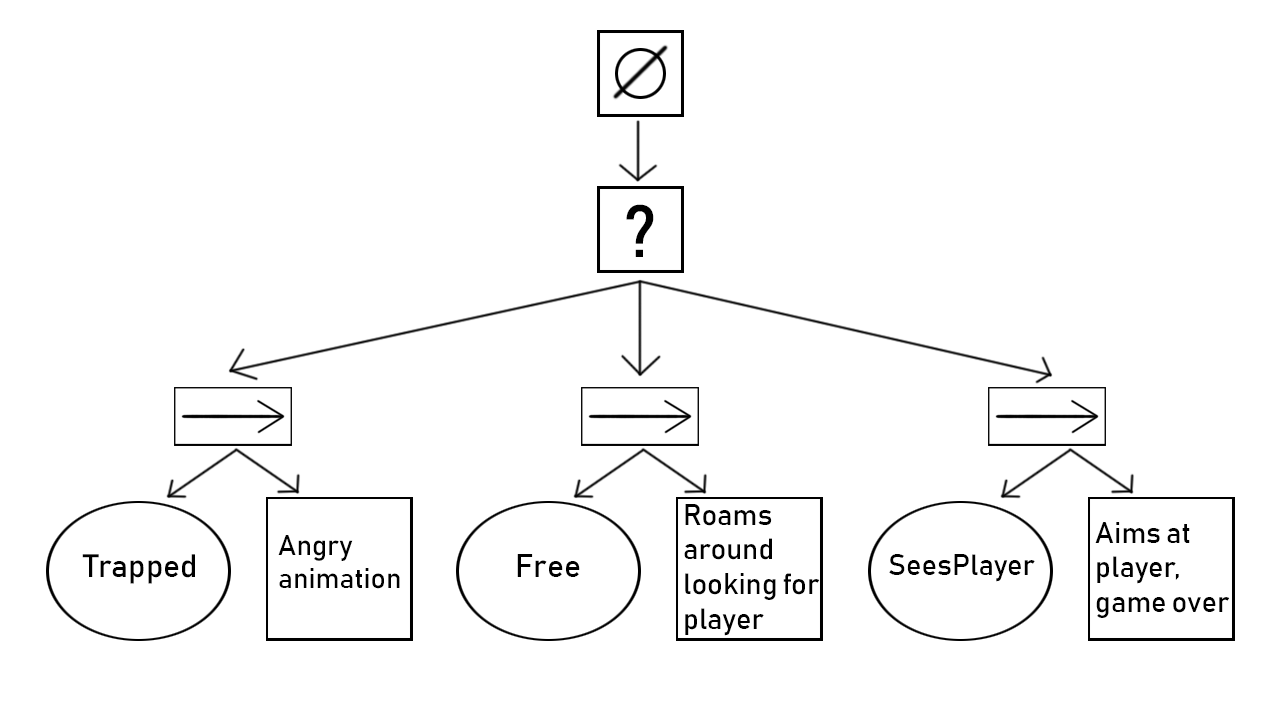
<style>
.page{position:relative;width:1280px;height:720px;background:#ffffff}
.page>*{position:absolute;margin:0}
.t1{font:29px "Bahnschrift";color:#000000}
.t2{font:28px "Bahnschrift";color:#000000}
.t3{font:32px "Bahnschrift";color:#000000}
</style>
<div class="page">
<p class="t1" style="left:684px;top:504px;width:136px;height:132px">Roams around looking for player</p>
<p class="t1" style="left:1095px;top:522px;width:135px;height:96px">Aims at player, game over</p>
<p class="t2" style="left:278px;top:535px;width:122px;height:54px">Angry animation</p>
<p class="t3" style="left:82px;top:554px;width:113px;height:30px">Trapped</p>
<p class="t3" style="left:517px;top:554px;width:63px;height:23px">Free</p>
<p class="t1" style="left:889px;top:554px;width:146px;height:28px">SeesPlayer</p>
</div>
